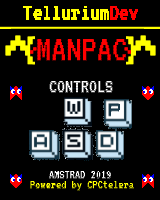
<style>
.page{position:relative;width:160px;height:200px;background:#000000}
.page>*{position:absolute;margin:0}
.t1{font:38px "VT323-Regular";color:#ff0000}
.t2{font:20px "VT323-Regular";color:#ffffff}
.t3{font:13px "VT323-Regular";color:#ffffff}
.t4{font:13px "VT323-Regular";color:#ffff00}
</style>
<div class="page">
<p class="t1" style="left:37px;top:39px;width:89px;height:22px">MANPAC</p>
<p class="t2" style="left:49px;top:81px;width:64px;height:12px">CONTROLS</p>
<p class="t3" style="left:49px;top:171px;width:62px;height:8px">AMSTRAD 2019</p>
<p class="t4" style="left:30px;top:181px;width:104px;height:10px">Powered by CPCtelera</p>
</div>
